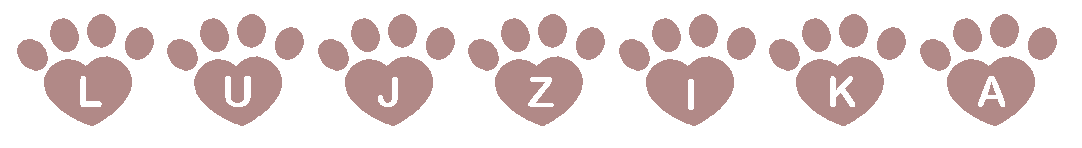
<style>
.page{position:relative;width:1082px;height:148px;background:#ffffff}
.page>*{position:absolute;margin:0}
.t1{font:125px "JLRPawrtyHearty";letter-spacing:0.005em;color:#b18987}
</style>
<div class="page">
<p class="t1" style="left:17px;top:14px;width:1040px;height:112px">LUJZIKA</p>
</div>
